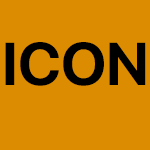
<style>
.page{position:relative;width:150px;height:150px;background:#dc8c00}
.page>*{position:absolute;margin:0}
.t1{font:60px "SFUIDisplay-Bold";color:#000000}
</style>
<div class="page">
<p class="t1" style="left:5px;top:42px;width:141px;height:44px">ICON</p>
</div>
